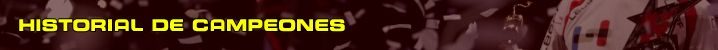
<style>
.page{position:relative;width:718px;height:50px}
.page>*{position:absolute;margin:0}
.t1{font:16px "ESLstile-Bold";color:#ffff00}
</style>
<div class="page">
<p class="t1" style="left:19px;top:19px;width:326px;height:13px">HISTORIAL DE CAMPEONES</p>
</div>
